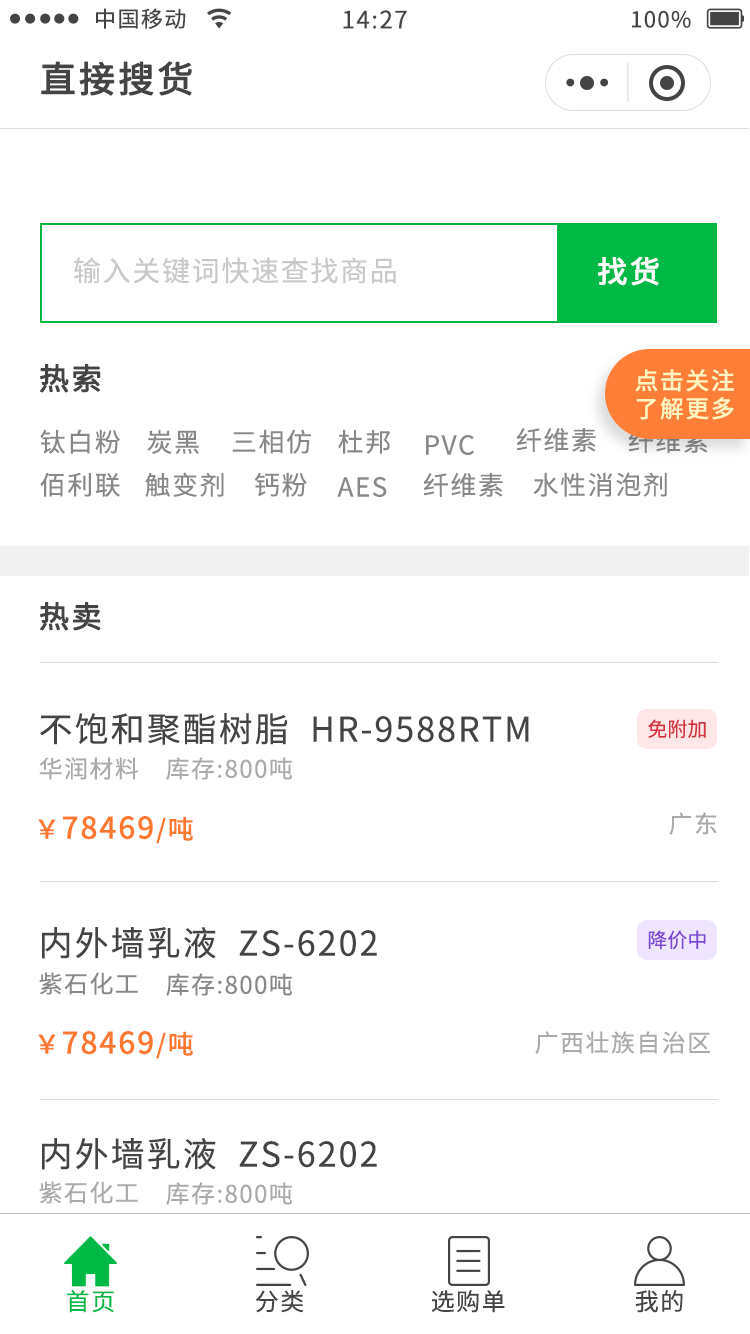
<style>
.page{position:relative;width:750px;height:1334px;background:#ffffff}
.page>*{position:absolute;margin:0}
.t1{font:22px "NotoSansCJKsc-Regular";letter-spacing:0.06em;color:#444444}
.t2{font:24px "NotoSansCJKsc-Regular";letter-spacing:0.06em;color:#444444}
.t3{font:36px "NotoSansCJKsc-Regular";letter-spacing:0.06em;color:#444444;font-weight:bold}
.t4{font:28px "NotoSansCJKsc-Regular";letter-spacing:0.06em;color:#c9c9c9}
.t5{font:30px "NotoSansCJKsc-Regular";letter-spacing:0.06em;color:#ffffff;font-weight:bold}
.t6{font:30px "NotoSansCJKsc-Regular";letter-spacing:0.06em;color:#444444;font-weight:bold}
.t7{font:24px/28px "NotoSansCJKsc-Medium";letter-spacing:0.06em;color:#fff5c1}
.t8{font:26px "NotoSansCJKsc-Regular";letter-spacing:0.06em;color:#888888}
.t9{font:26px "NotoSansCJKsc-Regular";letter-spacing:0.06em}
.t10{font:34px "NotoSansCJKsc-Regular";letter-spacing:0.06em;color:#444444}
.t11{font:20px "NotoSansCJKsc-Regular";color:#d5333e}
.t12{font:24px "NotoSansCJKsc-Regular";letter-spacing:0.06em;color:#aaaaaa}
.t13{font:30px "NotoSansCJKsc-Medium";letter-spacing:0.06em;color:#ff782f}
.t14{font:26px "NotoSansCJKsc-Medium";letter-spacing:0.06em;color:#ff782f}
.t15{font:20px "NotoSansCJKsc-Regular";color:#7d46d7}
.t16{font:24px "NotoSansCJKsc-Regular";letter-spacing:0.06em;color:#888888}
.t17{font:24px "NotoSansCJKsc-Regular";letter-spacing:0.06em;color:#00b945}
</style>
<div class="page">
<p class="t1" style="left:96px;top:8px;width:90px;height:21px">中国移动</p>
<p class="t2" style="left:343px;top:10px;width:64px;height:19px">14:27</p>
<p class="t1" style="left:632px;top:10px;width:59px;height:18px">100%</p>
<p class="t3" style="left:41px;top:61px;width:151px;height:35px">直接搜货</p>
<p class="t4" style="left:74px;top:257px;width:322px;height:27px">输入关键词快速查找商品</p>
<p class="t5" style="left:598px;top:256px;width:61px;height:30px">找货</p>
<p class="t6" style="left:40px;top:364px;width:61px;height:29px">热索</p>
<p class="t7" style="left:635px;top:369px;width:99px;height:51px">点击关注<br>了解更多</p>
<p class="t8" style="left:40px;top:429px;width:80px;height:25px">钛白粉</p>
<p class="t8" style="left:147px;top:429px;width:52px;height:25px">炭黑</p>
<p class="t8" style="left:232px;top:429px;width:79px;height:25px">三相仿</p>
<p class="t8" style="left:338px;top:429px;width:52px;height:25px">杜邦</p>
<p class="t8" style="left:426px;top:435px;width:48px;height:20px">PVC</p>
<p class="t8" style="left:516px;top:428px;width:80px;height:24px">纤维素</p>
<p class="t9" style="left:628px;top:429px;width:80px;height:24px">纤维素</p>
<p class="t8" style="left:40px;top:472px;width:80px;height:25px">佰利联</p>
<p class="t8" style="left:145px;top:472px;width:79px;height:25px">触变剂</p>
<p class="t8" style="left:255px;top:472px;width:52px;height:25px">钙粉</p>
<p class="t8" style="left:423px;top:473px;width:80px;height:24px">纤维素</p>
<p class="t8" style="left:533px;top:472px;width:134px;height:25px">水性消泡剂</p>
<p class="t8" style="left:337px;top:477px;width:50px;height:20px">AES</p>
<p class="t6" style="left:40px;top:602px;width:61px;height:29px">热卖</p>
<p class="t10" style="left:40px;top:713px;width:489px;height:32px">不饱和聚酯树脂  HR-9588RTM</p>
<p class="t11" style="left:648px;top:719px;width:58px;height:20px">免附加</p>
<p class="t12" style="left:39px;top:757px;width:99px;height:23px">华润材料</p>
<p class="t12" style="left:166px;top:757px;width:126px;height:23px">库存:800吨</p>
<p class="t13" style="left:38px;top:816px;width:155px;height:28px"><span class="t14">￥</span>78469<span class="t14">/吨</span></p>
<p class="t12" style="left:669px;top:812px;width:48px;height:23px">广东</p>
<p class="t10" style="left:42px;top:927px;width:335px;height:32px">内外墙乳液  ZS-6202</p>
<p class="t15" style="left:648px;top:930px;width:58px;height:20px">降价中</p>
<p class="t16" style="left:39px;top:972px;width:99px;height:23px">紫石化工</p>
<p class="t16" style="left:166px;top:973px;width:126px;height:23px">库存:800吨</p>
<p class="t13" style="left:38px;top:1031px;width:155px;height:28px"><span class="t14">￥</span>78469<span class="t14">/吨</span></p>
<p class="t12" style="left:535px;top:1031px;width:175px;height:23px">广西壮族自治区</p>
<p class="t10" style="left:42px;top:1138px;width:335px;height:32px">内外墙乳液  ZS-6202</p>
<p class="t12" style="left:39px;top:1181px;width:99px;height:23px">紫石化工</p>
<p class="t12" style="left:166px;top:1182px;width:126px;height:23px">库存:800吨</p>
<p class="t17" style="left:67px;top:1290px;width:47px;height:23px">首页</p>
<p class="t2" style="left:255px;top:1290px;width:49px;height:23px">分类</p>
<p class="t2" style="left:431px;top:1290px;width:74px;height:23px">选购单</p>
<p class="t2" style="left:635px;top:1290px;width:48px;height:23px">我的</p>
</div>
